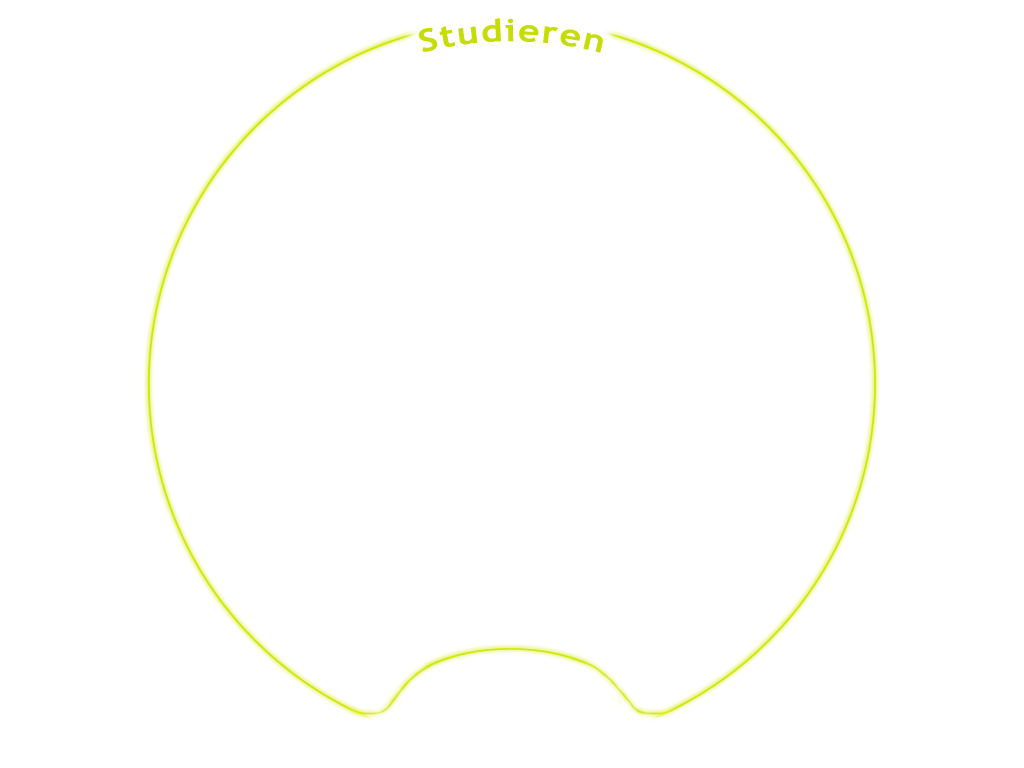
<style>
.page{position:relative;width:1024px;height:768px;background:#ffffff}
.page>*{position:absolute;margin:0}
.t1{font:30.9px "TrebuchetMS-Bold";letter-spacing:0.05em;color:#c6dc05;scale:1.2 1}
</style>
<div class="page">
<p class="t1" style="left:418px;top:18px;width:185px;height:35px">Studieren</p>
</div>
